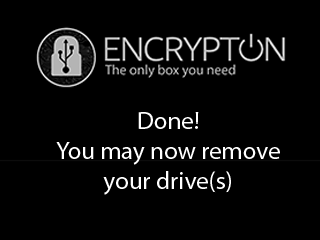
<style>
.page{position:relative;width:320px;height:240px;background:#000000}
.page>*{position:absolute;margin:0}
.t1{font:25px "MyriadPro-Regular";color:#ffffff}
</style>
<div class="page">
<p class="t1" style="left:56px;top:112px;width:224px;height:83px;text-align:center">Done!<br>You may now remove<br>your drive(s)</p>
</div>
